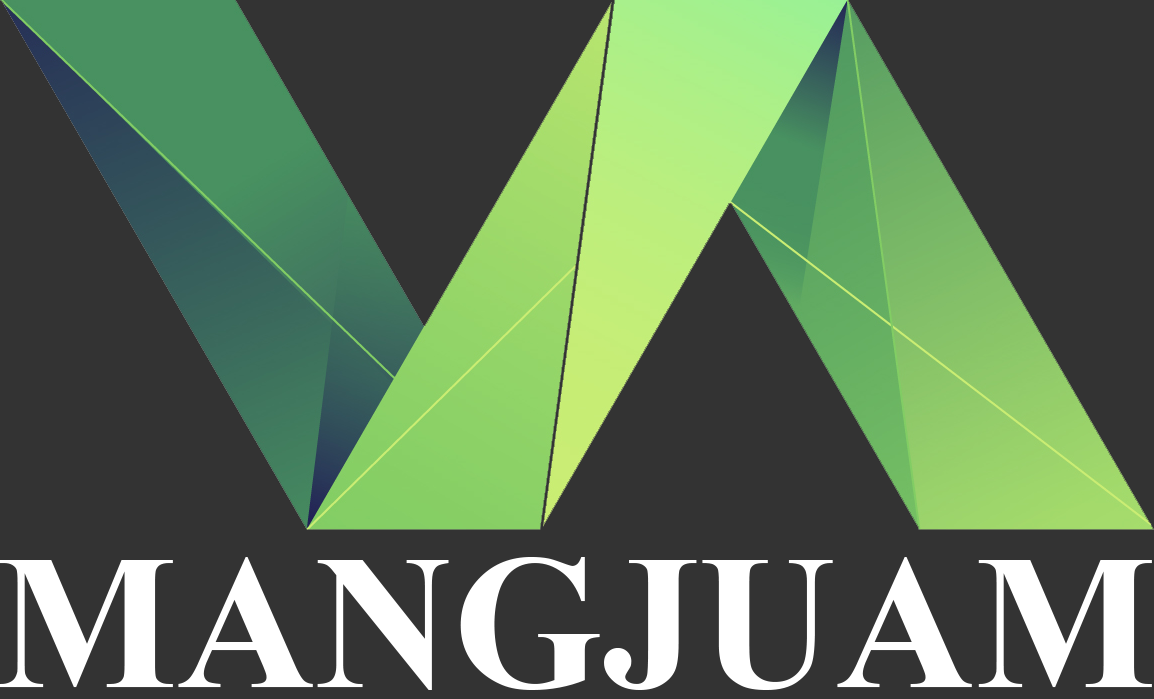
<style>
.page{position:relative;width:1154px;height:699px;background:#333333}
.page>*{position:absolute;margin:0}
.t1{font:191.5px "TimesNewRomanPS-BoldMT";color:#ffffff}
</style>
<div class="page">
<p class="t1" style="left:0px;top:557px;width:1152px;height:133px">MANGJUAM</p>
</div>
